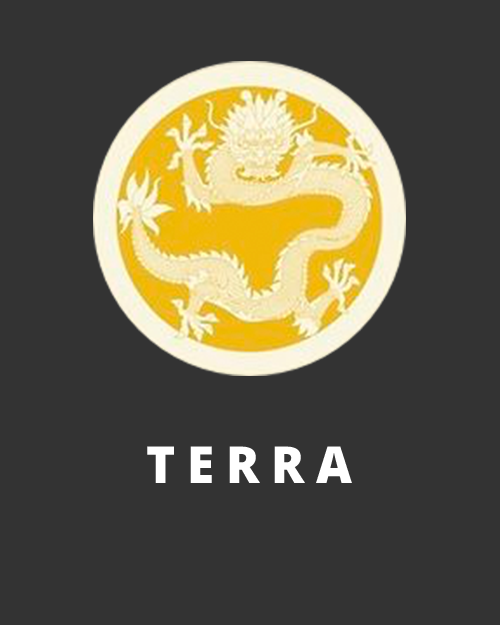
<style>
.page{position:relative;width:500px;height:625px;background:#333333}
.page>*{position:absolute;margin:0}
.t1{font:51px "OpenSans-Extrabold";letter-spacing:0.235em;color:#ffffff}
</style>
<div class="page">
<p class="t1" style="left:147px;top:446px;width:205px;height:37px">TERRA</p>
</div>
